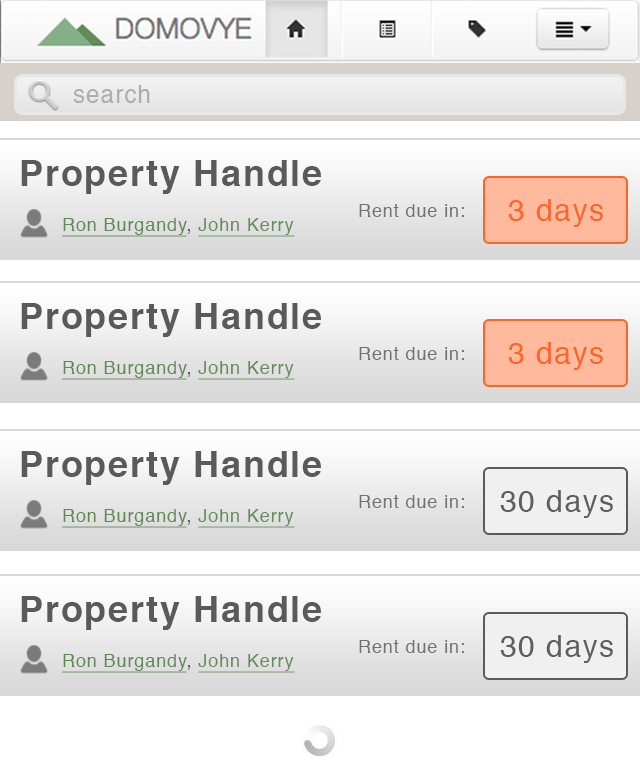
<style>
.page{position:relative;width:640px;height:781px;background:#ffffff}
.page>*{position:absolute;margin:0}
.t1{font:24px "Helvetica";letter-spacing:0.05em;color:#adadad}
.t2{font:36px "Helvetica-Bold";letter-spacing:0.05em;color:#5a5a5a}
.t3{font:18px "Helvetica";letter-spacing:0.05em;color:#717171}
.t4{font:30px "Helvetica";letter-spacing:0.05em;color:#ff6427}
.t5{font:18px "Helvetica";letter-spacing:0.05em;color:#5e8953;text-decoration:underline}
.t6{font:18px "Helvetica";letter-spacing:0.05em;color:#5a5a5a}
.t7{font:18px "Helvetica";letter-spacing:0.05em;color:#638c58;text-decoration:underline}
.t8{font:30px "Helvetica";letter-spacing:0.05em;color:#5e5e5e}
</style>
<div class="page">
<p class="t1" style="left:73px;top:85px;width:77px;height:18px">search</p>
<p class="t2" style="left:21px;top:160px;width:300px;height:34px">Property Handle</p>
<p class="t3" style="left:359px;top:204px;width:105px;height:13px">Rent due in:</p>
<p class="t4" style="left:508px;top:199px;width:95px;height:28px">3 days</p>
<p class="t5" style="left:62px;top:218px;width:233px;height:19px">Ron Burgandy<span class="t6">, </span><span class="t7">John Kerry</span></p>
<p class="t2" style="left:21px;top:303px;width:300px;height:34px">Property Handle</p>
<p class="t4" style="left:508px;top:342px;width:95px;height:28px">3 days</p>
<p class="t3" style="left:359px;top:347px;width:105px;height:13px">Rent due in:</p>
<p class="t5" style="left:62px;top:361px;width:233px;height:19px">Ron Burgandy<span class="t6">, </span><span class="t7">John Kerry</span></p>
<p class="t2" style="left:21px;top:451px;width:300px;height:34px">Property Handle</p>
<p class="t3" style="left:359px;top:495px;width:105px;height:13px">Rent due in:</p>
<p class="t8" style="left:500px;top:490px;width:113px;height:28px">30 days</p>
<p class="t5" style="left:62px;top:509px;width:233px;height:19px">Ron Burgandy<span class="t6">, </span><span class="t7">John Kerry</span></p>
<p class="t2" style="left:21px;top:596px;width:300px;height:34px">Property Handle</p>
<p class="t3" style="left:359px;top:640px;width:105px;height:13px">Rent due in:</p>
<p class="t8" style="left:500px;top:635px;width:113px;height:28px">30 days</p>
<p class="t5" style="left:62px;top:654px;width:233px;height:19px">Ron Burgandy<span class="t6">, </span><span class="t7">John Kerry</span></p>
</div>
